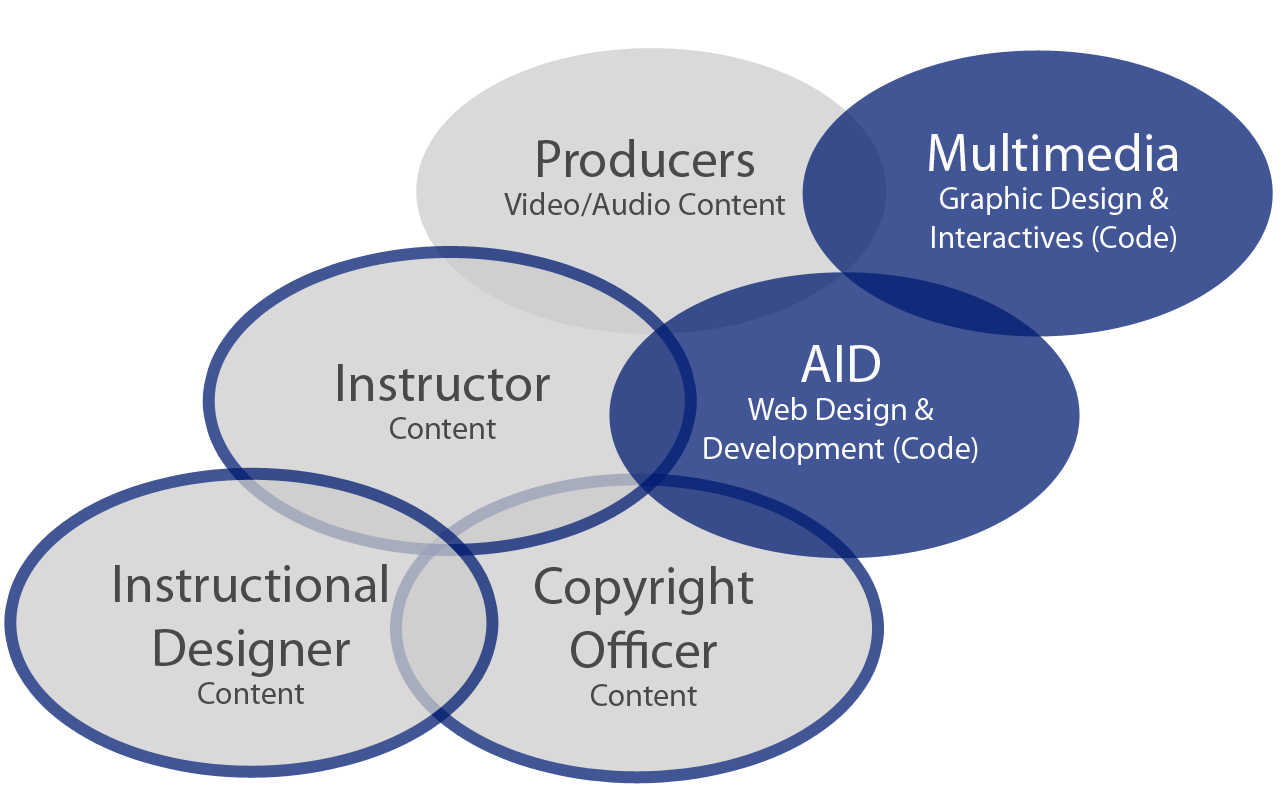
<style>
.page{position:relative;width:1288px;height:800px;background:#ffffff}
.page>*{position:absolute;margin:0}
.t1{font:32px "MyriadPro-Regular";color:#fcfcfd}
.t2{font:53.3px "MyriadPro-Regular";color:#fcfcfd}
.t3{font:32px "MyriadPro-Regular";color:#494949}
.t4{font:53.3px "MyriadPro-Regular";color:#494949}
</style>
<div class="page">
<p class="t1" style="left:929px;top:133px;width:249px;height:119px;text-align:center"><span class="t2">Multimedia<br></span>Graphic Design &amp; <br>Interactives (Code)</p>
<p class="t3" style="left:504px;top:139px;width:281px;height:78px;text-align:center"><span class="t4">Producers<br></span>Video/Audio Content</p>
<p class="t1" style="left:704px;top:345px;width:274px;height:120px;text-align:center"><span class="t2">AID<br></span>Web Design &amp; <br>Development (Code)</p>
<p class="t4" style="left:338px;top:364px;width:212px;height:75px;text-align:center">Instructor<br><span class="t3">Content</span></p>
<p class="t4" style="left:115px;top:564px;width:272px;height:140px;text-align:center">Instructional Designer<br><span class="t3">Content</span></p>
<p class="t4" style="left:535px;top:566px;width:219px;height:140px;text-align:center">Copyright <br>Officer<br><span class="t3">Content</span></p>
</div>
